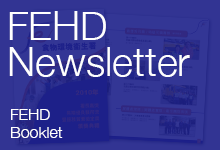
<style>
.page{position:relative;width:220px;height:150px;background:#333695}
.page>*{position:absolute;margin:0}
.t1{font:40px/36px "HelveticaNeue-Light";color:#ffffff}
.t2{font:16px/18px "HelveticaNeue-Light";color:#ffffff}
</style>
<div class="page">
<p class="t1" style="left:9px;top:11px;width:181px;height:66px">FEHD <br>Newsletter</p>
<p class="t2" style="left:11px;top:109px;width:52px;height:29px">FEHD<br>Booklet</p>
</div>
